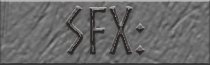
<style>
.page{position:relative;width:210px;height:65px}
.page>*{position:absolute;margin:0}
.t1{font:65px "Norse-Bold"}
</style>
<div class="page">
<p class="t1" style="left:65px;top:5px;width:80px;height:51px">SFX:</p>
</div>
